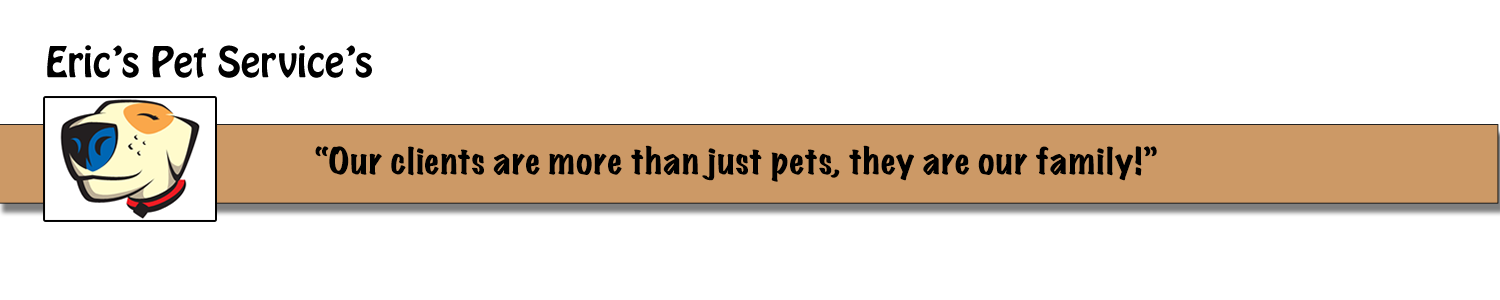
<style>
.page{position:relative;width:1500px;height:300px;background:#ffffff}
.page>*{position:absolute;margin:0}
.t1{font:37.5px "HoboStd";color:#000000}
.t2{font:33.3px "MarkerFelt-Wide";color:#000000}
</style>
<div class="page">
<p class="t1" style="left:47px;top:45px;width:325px;height:33px">Eric’s Pet Service’s</p>
<p class="t2" style="left:315px;top:145px;width:842px;height:37px">“Our clients are more than just pets, they are our family!”</p>
</div>
